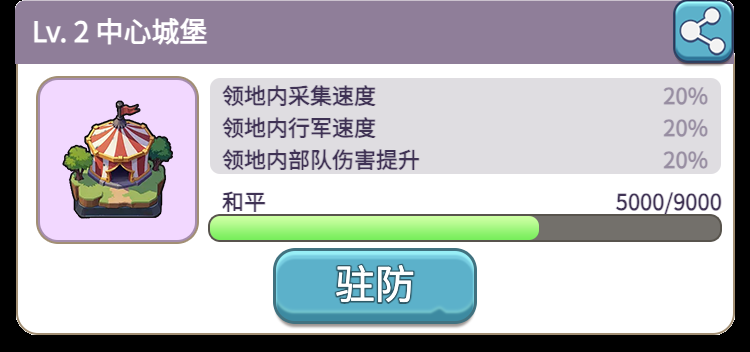
<style>
.page{position:relative;width:750px;height:352px;background:#ffffff}
.page>*{position:absolute;margin:0}
.t1{font:28px/28px "WebPSD-18463539-0-Regular";color:#ffffff;font-weight:bold}
.t2{font:22px "WebPSD-18463539-0-Regular";color:#3f3254;font-weight:bold}
.t3{font:22px "WebPSD-18463539-0-Regular";color:#988ea2;font-weight:bold}
</style>
<div class="page">
<p class="t1" style="left:32px;top:0px;width:520px;height:64px">Lv. 2 中心城堡</p>
<p class="t2" style="left:222px;top:80px;width:320px;height:32px">领地内采集速度</p>
<p class="t3" style="left:560px;top:80px;width:148px;height:32px">20%</p>
<p class="t2" style="left:222px;top:112px;width:320px;height:32px">领地内行军速度</p>
<p class="t3" style="left:560px;top:112px;width:148px;height:32px">20%</p>
<p class="t2" style="left:222px;top:144px;width:320px;height:32px">领地内部队伤害提升</p>
<p class="t3" style="left:560px;top:144px;width:148px;height:32px">20%</p>
<p class="t2" style="left:222px;top:189px;width:80px;height:26px">和平</p>
<p class="t2" style="left:548px;top:189px;width:174px;height:26px">5000/9000</p>
</div>
